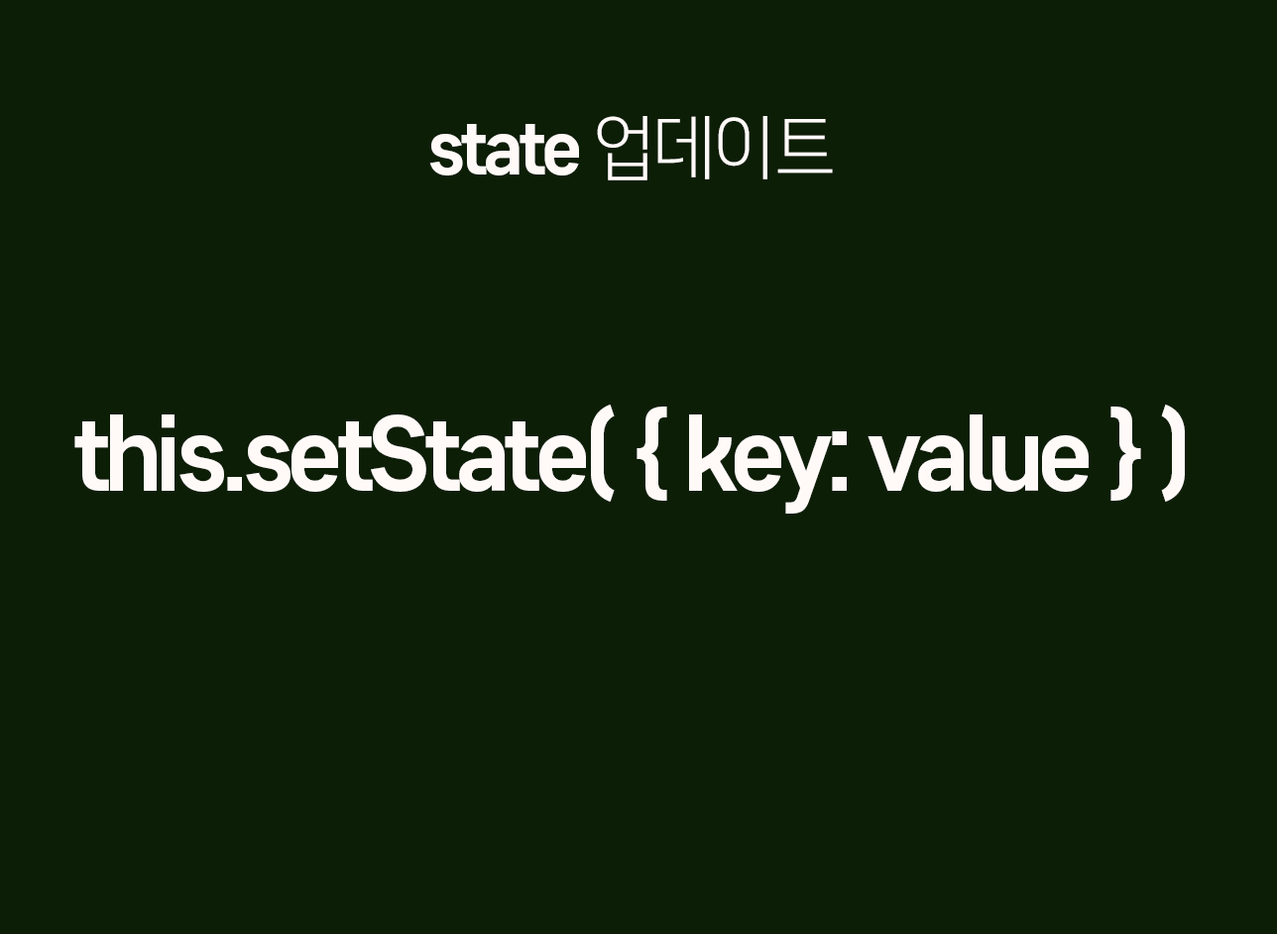
<style>
.page{position:relative;width:1277px;height:934px;background:#0d1e06}
.page>*{position:absolute;margin:0}
.t1{font:71.4px "CoreGothicD-7ExtraBold";letter-spacing:-0.075em;color:#fffaf8}
.t2{font:71.4px "CoreGothicD-3Light";letter-spacing:-0.075em;color:#fffaf8}
.t3{font:98.1px "CoreGothicD-7ExtraBold";letter-spacing:-0.075em;color:#fffaf8}
</style>
<div class="page">
<p class="t1" style="left:429px;top:116px;width:404px;height:64px">state<span class="t2"> 업데이트</span></p>
<p class="t3" style="left:74px;top:404px;width:1111px;height:110px">this.setState( { key: value } )</p>
</div>
